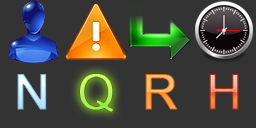
<style>
.page{position:relative;width:256px;height:128px;background:#333333}
.page>*{position:absolute;margin:0}
.t1{font:48px "ArialMT";font-weight:bold}
</style>
<div class="page">
<p class="t1" style="left:17px;top:74px;width:30px;height:36px">N</p>
<p class="t1" style="left:79px;top:73px;width:35px;height:40px">Q</p>
<p class="t1" style="left:145px;top:74px;width:33px;height:36px">R</p>
<p class="t1" style="left:209px;top:74px;width:30px;height:36px">H</p>
</div>
